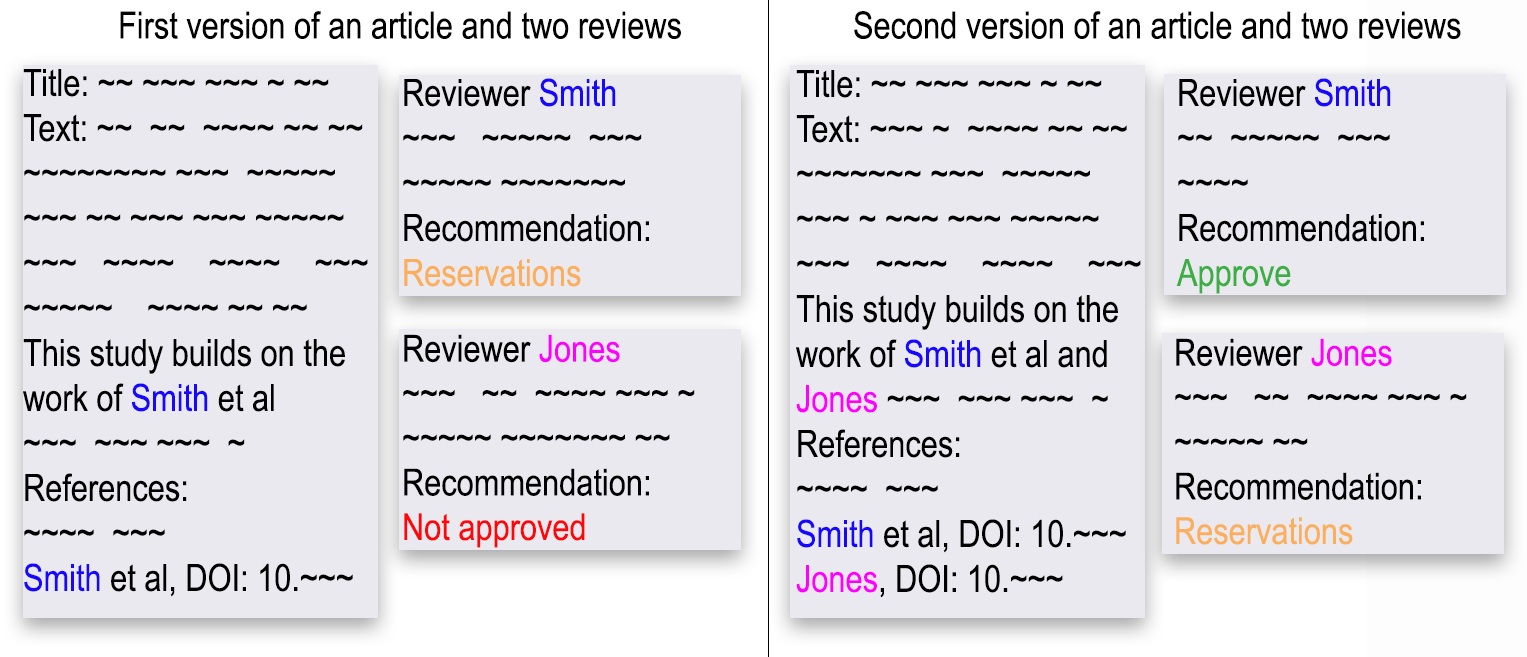
<style>
.page{position:relative;width:1527px;height:657px;background:#eae9ef}
.page>*{position:absolute;margin:0}
.t1{font:37.5px "ArialNarrow";color:#000000}
.t2{font:37.5px "ArialNarrow";color:#1707fe}
.t3{font:37.5px "ArialNarrow";color:#fbaf5d}
.t4{font:37.5px "ArialNarrow";color:#ff00ff}
.t5{font:37.5px "ArialNarrow";color:#3baf43}
.t6{font:37.2px "ArialNarrow";color:#000000}
.t7{font:37.2px "ArialNarrow";color:#ff00ff}
.t8{font:37.2px "ArialNarrow";color:#fe070b}
.t9{font:37.2px "ArialNarrow";color:#fbaf5d}
</style>
<div class="page">
<p class="t1" style="left:120px;top:11px;width:561px;height:28px">First version of an article and two reviews</p>
<p class="t1" style="left:854px;top:11px;width:607px;height:28px">Second version of an article and two reviews</p>
<p class="t1" style="left:23px;top:69px;width:345px;height:528px">Title: ~~ ~~~ ~~~ ~ ~~<br>Text: ~~  ~~  ~~~~ ~~ ~~<br>~~~~~~~~ ~~~  ~~~~~<br>~~~ ~~ ~~~ ~~~ ~~~~~<br>~~~   ~~~~    ~~~~    ~~~<br>~~~~~    ~~~~ ~~ ~~<br>This study builds on the work of <span class="t2">Smith </span>et al<br>~~~  ~~~ ~~~  ~ <br>References:<br>~~~~  ~~~<br><span class="t2">Smith </span>et al, DOI: 10.~~~</p>
<p class="t1" style="left:403px;top:78px;width:246px;height:209px">Reviewer <span class="t2">Smith<br></span>~~~   ~~~~~  ~~~<br>~~~~~ ~~~~~~~ <br>Recommendation:<br><span class="t3">Reservations</span></p>
<p class="t1" style="left:796px;top:70px;width:345px;height:528px">Title: ~~ ~~~ ~~~ ~ ~~<br>Text: ~~~ ~  ~~~~ ~~ ~~<br>~~~~~~~ ~~~  ~~~~~<br>~~~ ~ ~~~ ~~~ ~~~~~<br>~~~   ~~~~    ~~~~    ~~~<br>This study builds on the work of <span class="t2">Smith </span>et al and <span class="t4">Jones </span>~~~  ~~~ ~~~  ~ <br>References:<br>~~~~  ~~~<br><span class="t2">Smith </span>et al, DOI: 10.~~~<br><span class="t4">Jones</span>, DOI: 10.~~~</p>
<p class="t1" style="left:1176px;top:78px;width:248px;height:216px">Reviewer <span class="t2">Smith<br></span>~~  ~~~~~  ~~~<br>~~~~ <br>Recommendation:<br><span class="t5">Approve</span></p>
<p class="t6" style="left:403px;top:334px;width:292px;height:214px">Reviewer <span class="t7">Jones<br></span>~~~   ~~  ~~~~ ~~~ ~<br>~~~~~ ~~~~~~~ ~~<br>Recommendation:<br><span class="t8">Not approved</span></p>
<p class="t6" style="left:1175px;top:338px;width:292px;height:207px">Reviewer <span class="t7">Jones<br></span>~~~   ~~  ~~~~ ~~~ ~<br>~~~~~ ~~<br>Recommendation:<br><span class="t9">Reservations</span></p>
</div>
